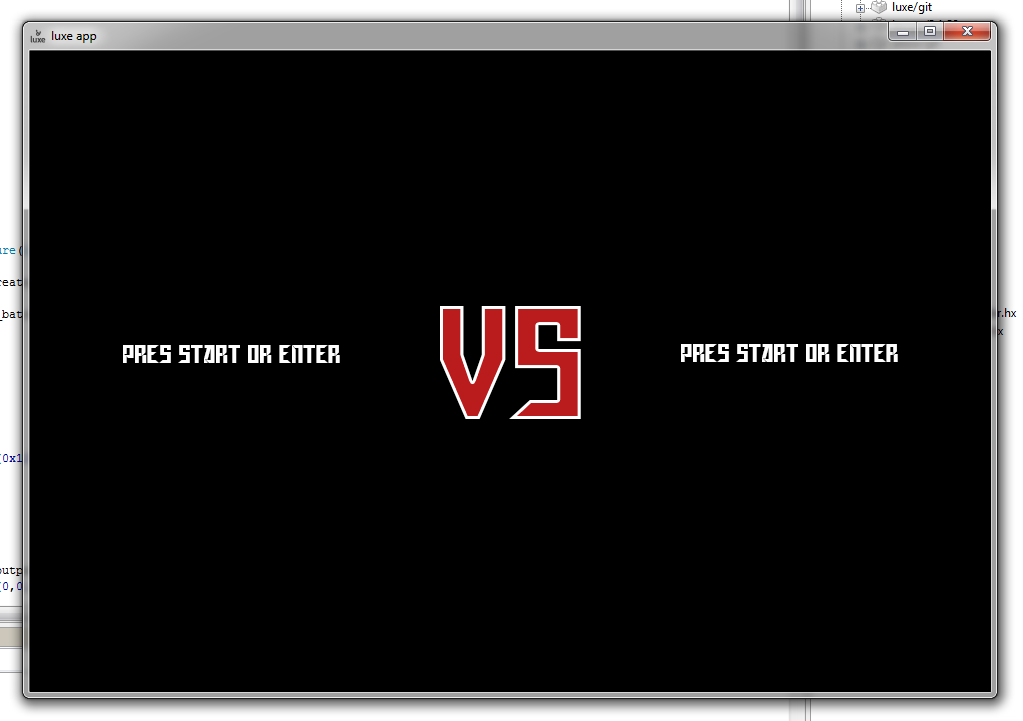
<style>
.page{position:relative;width:1023px;height:721px;background:#000000}
.page>*{position:absolute;margin:0}
.t1{font:188px "GagarinStarMix";color:#ba1b1d}
.t2{font:30px "GagarinStarMix";color:#fefefe}
</style>
<div class="page">
<p class="t1" style="left:440px;top:306px;width:141px;height:113px">VS</p>
<p class="t2" style="left:123px;top:345px;width:217px;height:18px">Pres start or enter</p>
<p class="t2" style="left:681px;top:344px;width:217px;height:18px">Pres start or enter</p>
</div>
